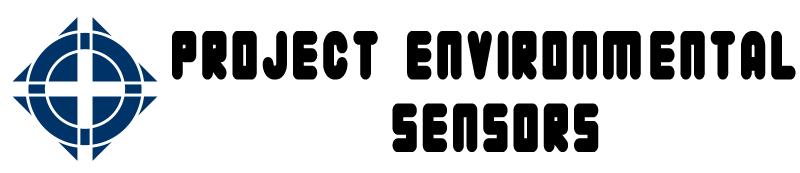
<style>
.page{position:relative;width:800px;height:173px;background:#ffffff}
.page>*{position:absolute;margin:0}
.t1{font:60.5px "a2203";color:#000000;scale:0.78 1}
</style>
<div class="page">
<p class="t1" style="left:172px;top:31px;width:624px;height:121px;text-align:center">Project Environmental <br>Sensors</p>
</div>
